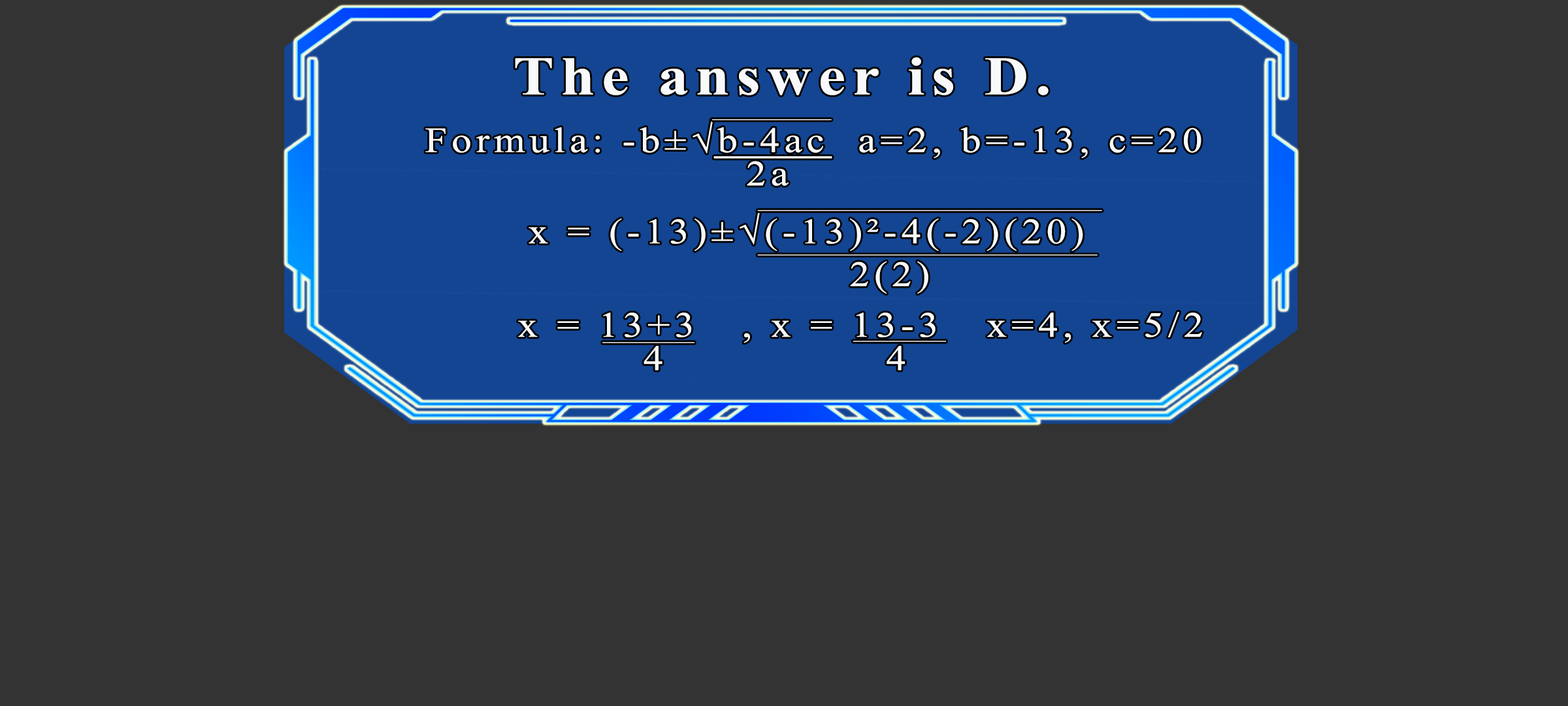
<style>
.page{position:relative;width:1568px;height:706px;background:#333333}
.page>*{position:absolute;margin:0}
.t1{font:54.4px "TimesNewRomanPS-BoldMT";letter-spacing:0.115em;color:#f7f9fb;scale:1.12 1}
.t2{font:35.6px/33.2px "TimesNewRomanPSMT";letter-spacing:0.115em;color:#f7f9fb;scale:1.12 1}
.t3{font:5.3px "GillSans-UltraBoldCondensed";letter-spacing:0.115em;scale:64.05 1}
.t4{font:18.4px "GillSans-UltraBoldCondensed";letter-spacing:0.115em;color:#f7f9fb;scale:18.07 1}
.t5{font:5.3px "GillSans-UltraBoldCondensed";letter-spacing:0.115em;scale:184.87 1}
.t6{font:35.6px/42.7px "TimesNewRomanPSMT";letter-spacing:0.115em;color:#f7f9fb;scale:1.12 1}
.t7{font:5.3px "GillSans-UltraBoldCondensed";letter-spacing:0.115em;scale:182.45 1}
.t8{font:5.3px "GillSans-UltraBoldCondensed";letter-spacing:0.115em;scale:49.51 1}
.t9{font:5.3px "GillSans-UltraBoldCondensed";letter-spacing:0.115em;scale:49.78 1}
</style>
<div class="page">
<p class="t1" style="left:515px;top:57px;width:534px;height:38px">The answer is D.</p>
<p class="t2" style="left:425px;top:119px;width:776px;height:67px">Formula: -b±√b-4ac  a=2, b=-13, c=20<br>                  2a</p>
<p class="t3" style="left:712px;top:119px;width:120px;height:1px">_</p>
<p class="t4" style="left:713px;top:156px;width:119px;height:3px">_</p>
<p class="t5" style="left:757px;top:210px;width:345px;height:1px">_</p>
<p class="t6" style="left:529px;top:210px;width:554px;height:84px">x = (-13)±√(-13)²-4(-2)(20)<br>                   2(2)</p>
<p class="t7" style="left:757px;top:254px;width:341px;height:1px">_</p>
<p class="t2" style="left:518px;top:312px;width:684px;height:58px">x = 13+3   , x = 13-3   x=4, x=5/2 <br>        4               4</p>
<p class="t8" style="left:602px;top:342px;width:92px;height:1px">_</p>
<p class="t9" style="left:853px;top:340px;width:93px;height:2px">_</p>
</div>
